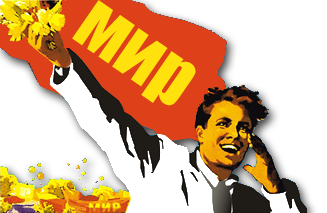
<style>
.page{position:relative;width:327px;height:213px;background:#ffffff}
.page>*{position:absolute;margin:0}
.t1{font:72px "Impact";color:#ffe20d}
</style>
<div class="page">
<p class="t1" style="left:72px;top:0px;width:124px;height:106px;rotate:35deg">мир</p>
</div>
